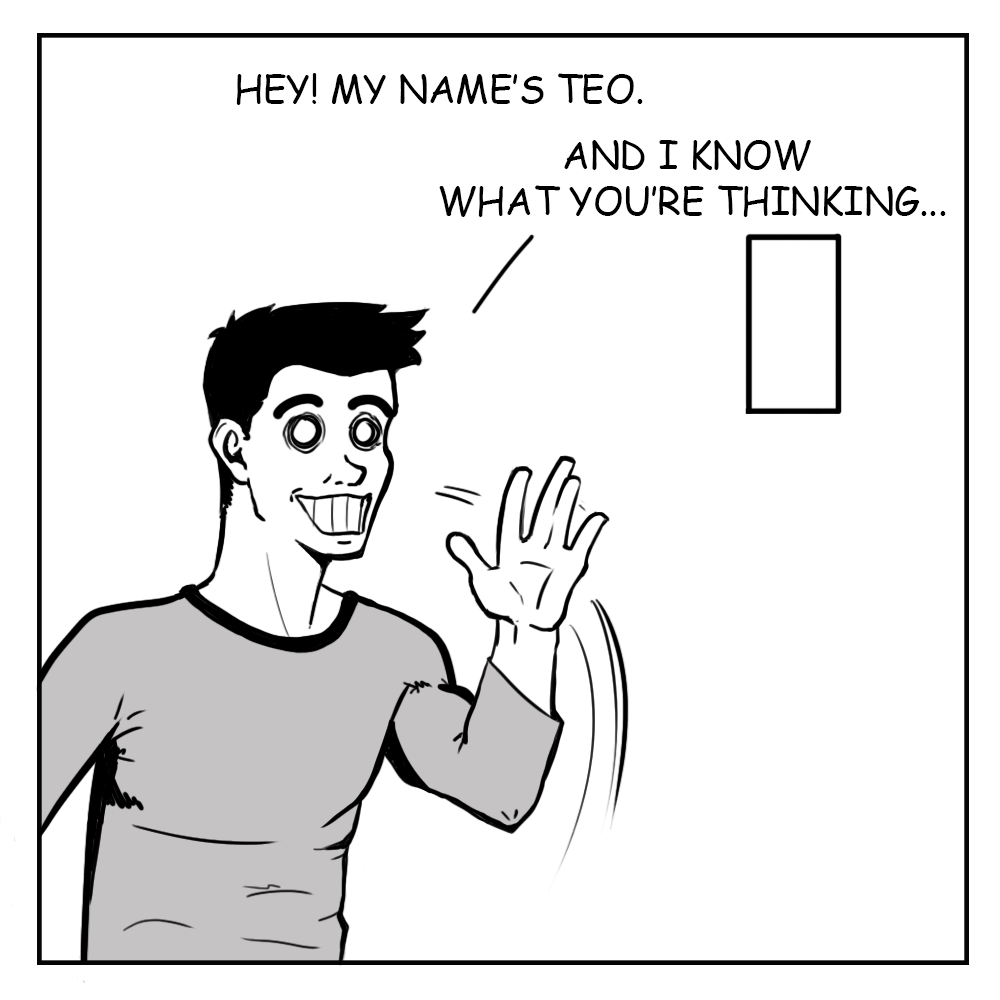
<style>
.page{position:relative;width:1000px;height:1000px;background:#ffffff}
.page>*{position:absolute;margin:0}
.t1{font:37.5px "ComicSansMS";color:#000000;text-transform:uppercase}
.t2{font:37.5px/45.8px "ComicSansMS";color:#000000;text-transform:uppercase}
</style>
<div class="page">
<p class="t1" style="left:236px;top:73px;width:407px;height:32px">Hey! my name’s Teo.</p>
<p class="t2" style="left:439px;top:140px;width:507px;height:77px;text-align:center">And i know <br>what you’re thinking...</p>
</div>
